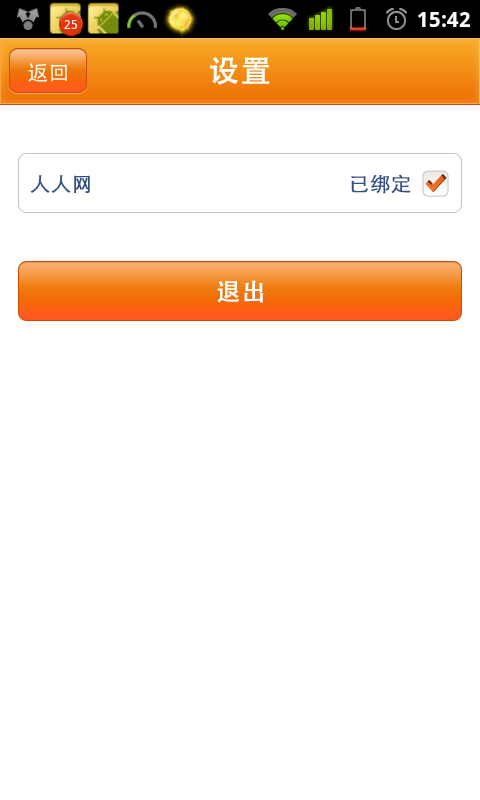
<style>
.page{position:relative;width:480px;height:800px;background:#ffffff}
.page>*{position:absolute;margin:0}
.t1{font:21px "STHeiti";color:#ffffff}
.t2{font:30px "AdobeHeitiStd-Regular";letter-spacing:0.025em;color:#ffffff;font-weight:bold}
.t3{font:20px "STXihei";letter-spacing:0.025em;color:#324f85;font-weight:bold}
.t4{font:24px "STHeiti";letter-spacing:0.025em;color:#ffffff;font-weight:bold}
</style>
<div class="page">
<p class="t1" style="left:28px;top:63px;width:39px;height:19px">返回</p>
<p class="t2" style="left:210px;top:57px;width:60px;height:28px">设置</p>
<p class="t3" style="left:351px;top:174px;width:60px;height:20px">已绑定</p>
<p class="t3" style="left:30px;top:175px;width:60px;height:18px">人人网</p>
<p class="t4" style="left:217px;top:280px;width:47px;height:23px">退出</p>
</div>
